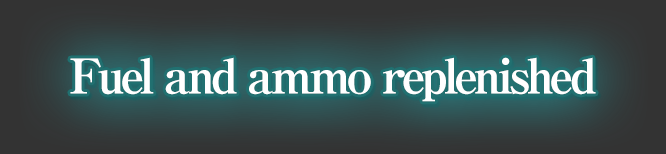
<style>
.page{position:relative;width:666px;height:154px}
.page>*{position:absolute;margin:0}
.t1{font:48px "RyuminPro-ExBold";letter-spacing:-0.08em;color:#ffffff}
</style>
<div class="page">
<p class="t1" style="left:70px;top:57px;width:526px;height:45px">Fuel and ammo replenished</p>
</div>
